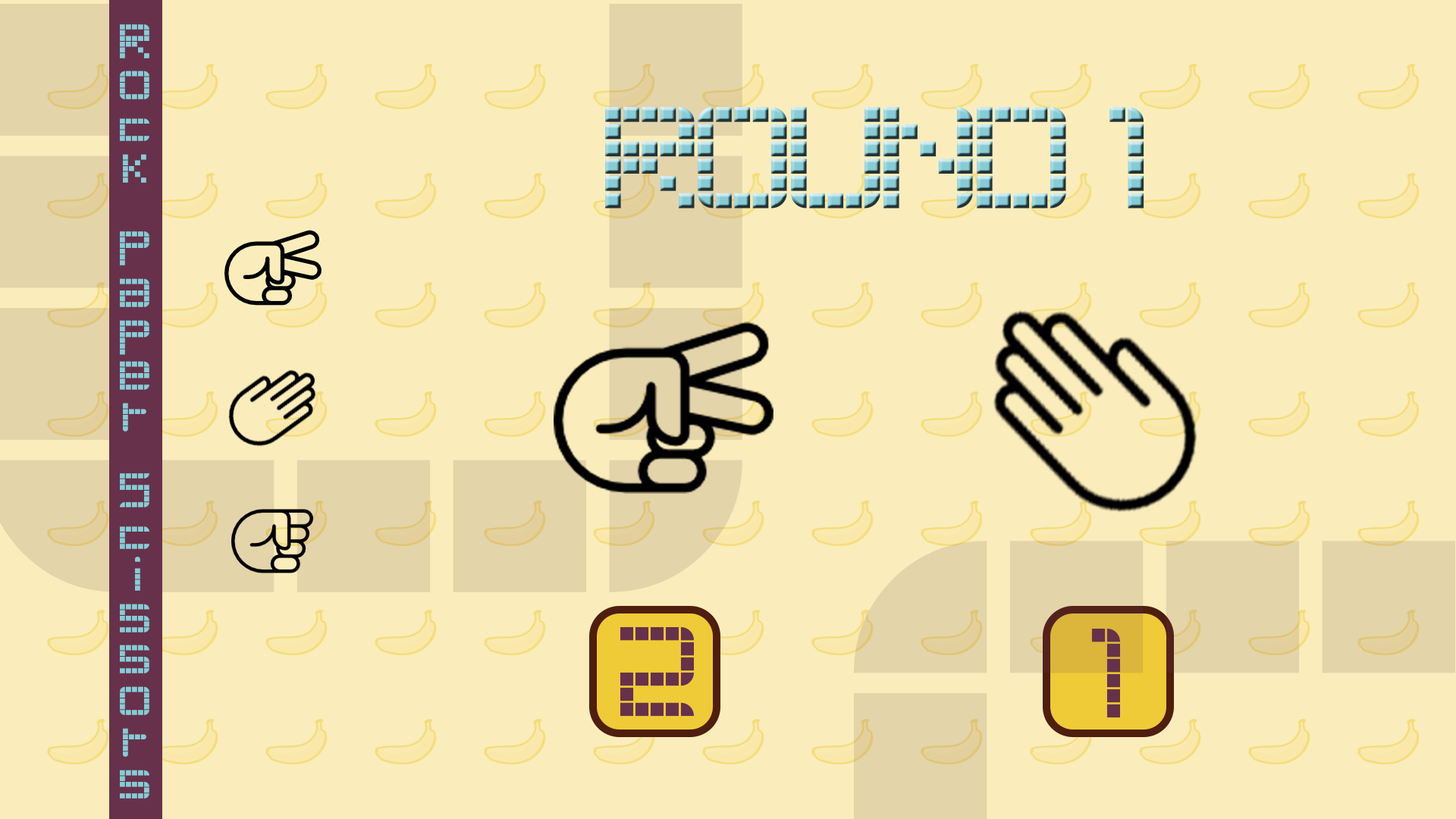
<style>
.page{position:relative;width:1456px;height:819px;background:#faedbb}
.page>*{position:absolute;margin:0}
.t1{font:48.5px/21.2px "Retro-Party";letter-spacing:-0.1em;color:#86ccd6;scale:0.95 1}
.t2{font:138px "Retro-Party";letter-spacing:-0.1em;scale:1.06 1}
.t3{font:121.1px "Retro-Party";letter-spacing:-0.1em;color:#67314b}
</style>
<div class="page">
<p class="t1" style="left:120px;top:24px;width:29px;height:775px">Rock      Paper     Scissors</p>
<p class="t2" style="left:605px;top:107px;width:539px;height:102px">ROUND 1</p>
<p class="t3" style="left:620px;top:627px;width:74px;height:90px">2</p>
<p class="t3" style="left:1091px;top:629px;width:29px;height:89px">1</p>
</div>
